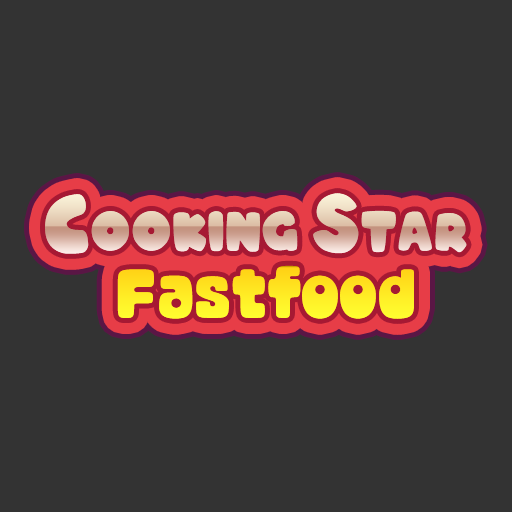
<style>
.page{position:relative;width:512px;height:512px;background:#333333}
.page>*{position:absolute;margin:0}
.t1{font:50px "CocoBubble-Regular";letter-spacing:-0.04em}
.t2{font:75px "CocoBubble-Regular";letter-spacing:-0.04em}
.t3{font:69.6px "marlon-regular";color:#ffeb24}
</style>
<div class="page">
<p class="t1" style="left:45px;top:193px;width:422px;height:61px"><span class="t2">C</span>ooking <span class="t2">S</span>tar</p>
<p class="t3" style="left:117px;top:265px;width:297px;height:54px">Fastfood</p>
</div>
